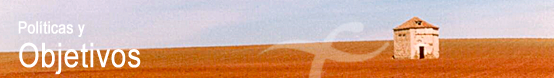
<style>
.page{position:relative;width:554px;height:78px}
.page>*{position:absolute;margin:0}
.t1{font:16.7px "ArialNarrow";color:#ffffff;font-weight:bold}
.t2{font:34px "ArialNarrow";color:#ffffff;font-weight:bold}
</style>
<div class="page">
<p class="t1" style="left:18px;top:21px;width:67px;height:16px">Políticas y</p>
<p class="t2" style="left:19px;top:42px;width:122px;height:33px">Objetivos</p>
</div>
